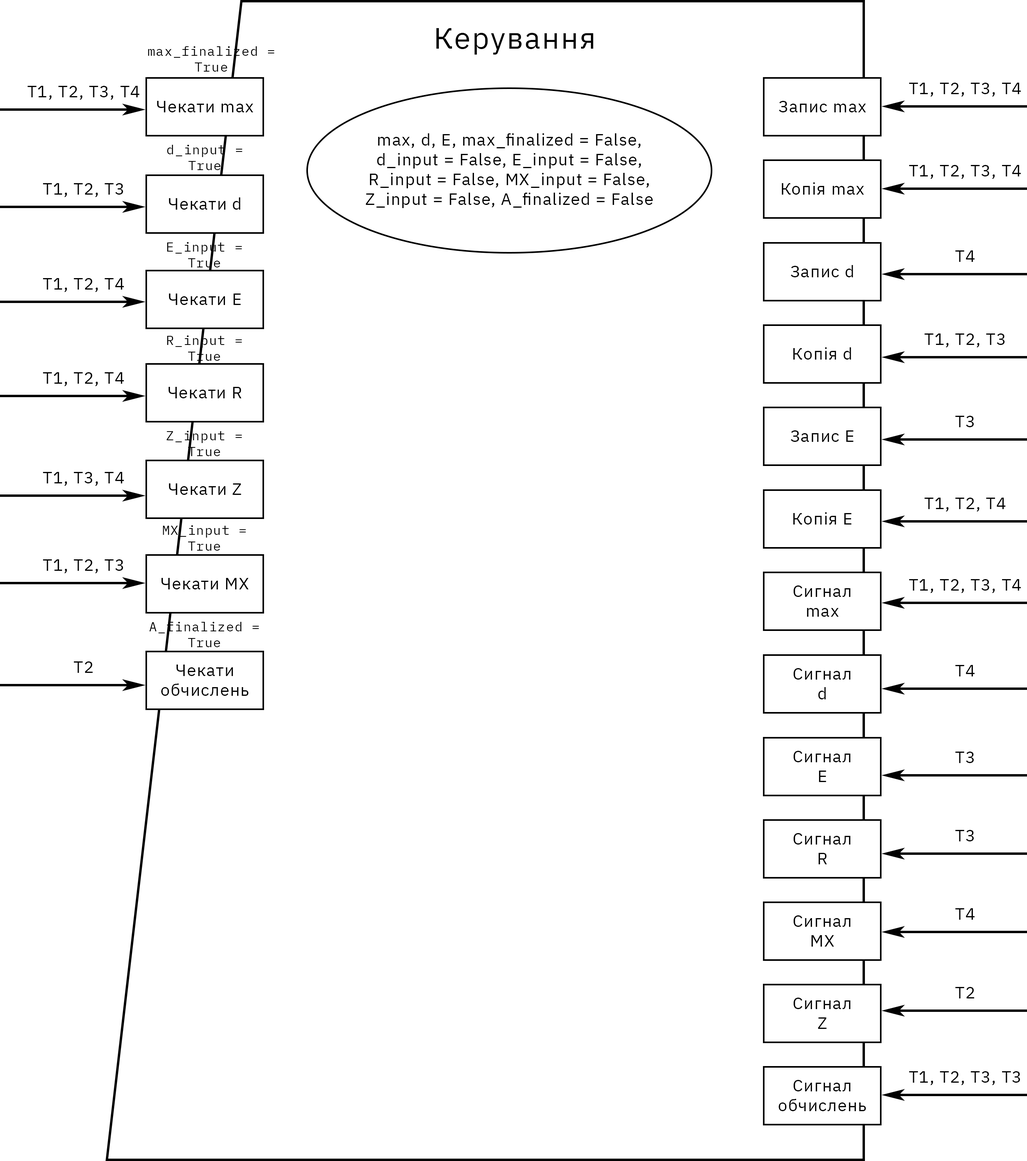
<style>
.page{position:relative;width:1027px;height:1161px;background:#ffffff}
.page>*{position:absolute;margin:0}
.t1{font:29.7px "IBMPlexSans";letter-spacing:0.05em;color:#000000}
.t2{font:13.2px "IBMPlexMono";letter-spacing:0.05em;color:#000000}
.t3{font:16.5px "IBMPlexSans";letter-spacing:0.05em;color:#000000}
</style>
<div class="page">
<p class="t1" style="left:437px;top:28px;width:157px;height:27px">Керування</p>
<p class="t2" style="left:148px;top:46px;width:126px;height:26px;text-align:center">max_finalized = True</p>
<p class="t3" style="left:27px;top:86px;width:113px;height:14px">T1, T2, T3, T4</p>
<p class="t3" style="left:909px;top:83px;width:112px;height:13px">T1, T2, T3, T4</p>
<p class="t3" style="left:157px;top:101px;width:96px;height:11px">Чекати max</p>
<p class="t3" style="left:779px;top:101px;width:87px;height:11px">Запис max</p>
<p class="t3" style="left:366px;top:133px;width:287px;height:75px;text-align:center">max, d, E, max_finalized = False,<br>d_input = False, E_input = False,<br>R_input = False, MX_input = False,<br>Z_input = False, A_finalized = False</p>
<p class="t2" style="left:167px;top:145px;width:75px;height:25px;text-align:center">d_input = True</p>
<p class="t3" style="left:909px;top:165px;width:112px;height:14px">T1, T2, T3, T4</p>
<p class="t3" style="left:43px;top:183px;width:80px;height:14px">T1, T2, T3</p>
<p class="t3" style="left:782px;top:182px;width:82px;height:13px">Копія max</p>
<p class="t3" style="left:169px;top:197px;width:71px;height:13px">Чекати d</p>
<p class="t2" style="left:167px;top:242px;width:75px;height:25px;text-align:center">E_input = True</p>
<p class="t3" style="left:955px;top:250px;width:20px;height:12px">T4</p>
<p class="t3" style="left:791px;top:265px;width:62px;height:12px">Запис d</p>
<p class="t3" style="left:43px;top:278px;width:81px;height:14px">T1, T2, T4</p>
<p class="t3" style="left:169px;top:293px;width:72px;height:12px">Чекати E</p>
<p class="t2" style="left:167px;top:335px;width:75px;height:26px;text-align:center">R_input = True</p>
<p class="t3" style="left:925px;top:333px;width:80px;height:14px">T1, T2, T3</p>
<p class="t3" style="left:793px;top:347px;width:58px;height:12px">Копія d</p>
<p class="t3" style="left:43px;top:372px;width:81px;height:14px">T1, T2, T4</p>
<p class="t3" style="left:168px;top:387px;width:74px;height:11px">Чекати R</p>
<p class="t3" style="left:955px;top:416px;width:19px;height:11px">T3</p>
<p class="t2" style="left:166px;top:431px;width:76px;height:25px;text-align:center">Z_input = True</p>
<p class="t3" style="left:791px;top:430px;width:63px;height:12px">Запис E</p>
<p class="t3" style="left:43px;top:472px;width:81px;height:14px">T1, T3, T4</p>
<p class="t3" style="left:169px;top:483px;width:72px;height:12px">Чекати Z</p>
<p class="t3" style="left:925px;top:497px;width:81px;height:14px">T1, T2, T4</p>
<p class="t3" style="left:793px;top:512px;width:59px;height:12px">Копія E</p>
<p class="t2" style="left:163px;top:525px;width:83px;height:25px;text-align:center">MX_input = True</p>
<p class="t3" style="left:43px;top:559px;width:80px;height:14px">T1, T2, T3</p>
<p class="t3" style="left:161px;top:578px;width:88px;height:11px">Чекати MX</p>
<p class="t3" style="left:909px;top:579px;width:112px;height:14px">T1, T2, T3, T4</p>
<p class="t3" style="left:794px;top:585px;width:57px;height:32px;text-align:center">Сигнал<br>max</p>
<p class="t2" style="left:149px;top:622px;width:110px;height:25px;text-align:center">A_finalized = True</p>
<p class="t3" style="left:74px;top:661px;width:19px;height:12px">T2</p>
<p class="t3" style="left:161px;top:664px;width:88px;height:32px;text-align:center">Чекати<br>обчислень</p>
<p class="t3" style="left:955px;top:665px;width:20px;height:11px">T4</p>
<p class="t3" style="left:794px;top:668px;width:57px;height:31px;text-align:center">Сигнал<br>d</p>
<p class="t3" style="left:794px;top:751px;width:57px;height:31px;text-align:center">Сигнал<br>E</p>
<p class="t3" style="left:955px;top:751px;width:19px;height:12px">T3</p>
<p class="t3" style="left:794px;top:833px;width:57px;height:31px;text-align:center">Сигнал<br>R</p>
<p class="t3" style="left:955px;top:830px;width:19px;height:11px">T3</p>
<p class="t3" style="left:794px;top:915px;width:57px;height:31px;text-align:center">Сигнал<br>MX</p>
<p class="t3" style="left:955px;top:908px;width:20px;height:11px">T4</p>
<p class="t3" style="left:955px;top:987px;width:20px;height:11px">T2</p>
<p class="t3" style="left:794px;top:997px;width:57px;height:32px;text-align:center">Сигнал<br>Z</p>
<p class="t3" style="left:909px;top:1071px;width:112px;height:14px">T1, T2, T3, T3</p>
<p class="t3" style="left:779px;top:1080px;width:87px;height:31px;text-align:center">Сигнал<br>обчислень</p>
</div>
